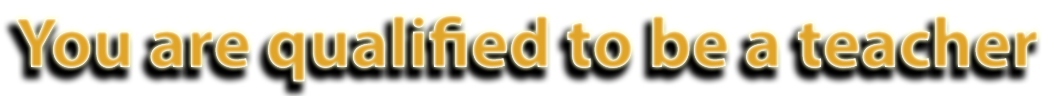
<style>
.page{position:relative;width:1054px;height:96px;background:#ffffff}
.page>*{position:absolute;margin:0}
.t1{font:72px "MyriadPro-Bold"}
</style>
<div class="page">
<p class="t1" style="left:15px;top:15px;width:1023px;height:67px">You are qualified to be a teacher</p>
</div>
